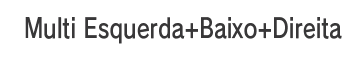
<style>
.page{position:relative;width:342px;height:60px;background:#ffffff}
.page>*{position:absolute;margin:0}
.t1{font:26.7px "RodinPro-DB";letter-spacing:0.008em;color:#383738;scale:0.79 1}
</style>
<div class="page">
<p class="t1" style="left:25px;top:17px;width:317px;height:27px">Multi Esquerda+Baixo+Direita</p>
</div>
